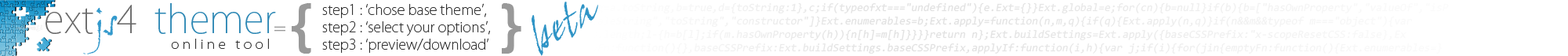
<style>
.page{position:relative;width:1568px;height:56px;background:#ffffff}
.page>*{position:absolute;margin:0}
.t1{font:37.6px "KozGoPro-ExtraLight";color:#2c87b4}
.t2{font:37.6px "Harabara";color:#666666}
.t3{font:37.6px "KozGoPro-ExtraLight";color:#666666}
.t4{font:37.6px "JohnHandyLetPlain";color:#3399cc}
.t5{font:56.4px "Harabara";color:#999999}
.t6{font:14.1px/17.2px "KozGoPro-ExtraLight";color:#333333}
.t7{font:16.6px "KozGoPro-Regular";letter-spacing:0.23em;color:#999999;scale:1.14 1}
.t8{font:12.4px "KozGoPro-ExtraLight";letter-spacing:0.23em;color:#333333;scale:1.14 1}
</style>
<div class="page">
<p class="t1" style="left:45px;top:3px;width:231px;height:51px"><span class="t2">  </span><span class="t3">ext</span><span class="t4">js</span><span class="t3">4  </span>themer</p>
<p class="t5" style="left:292px;top:3px;width:229px;height:50px">{               }</p>
<p class="t6" style="left:322px;top:3px;width:168px;height:50px">step1 : ‘chose base theme’, <br>step2 : ‘select your options’, <br>step3 : ‘preview/download’</p>
<p class="t7" style="left:274px;top:26px;width:11px;height:5px">=</p>
<p class="t8" style="left:171px;top:38px;width:98px;height:11px">online tool</p>
</div>
